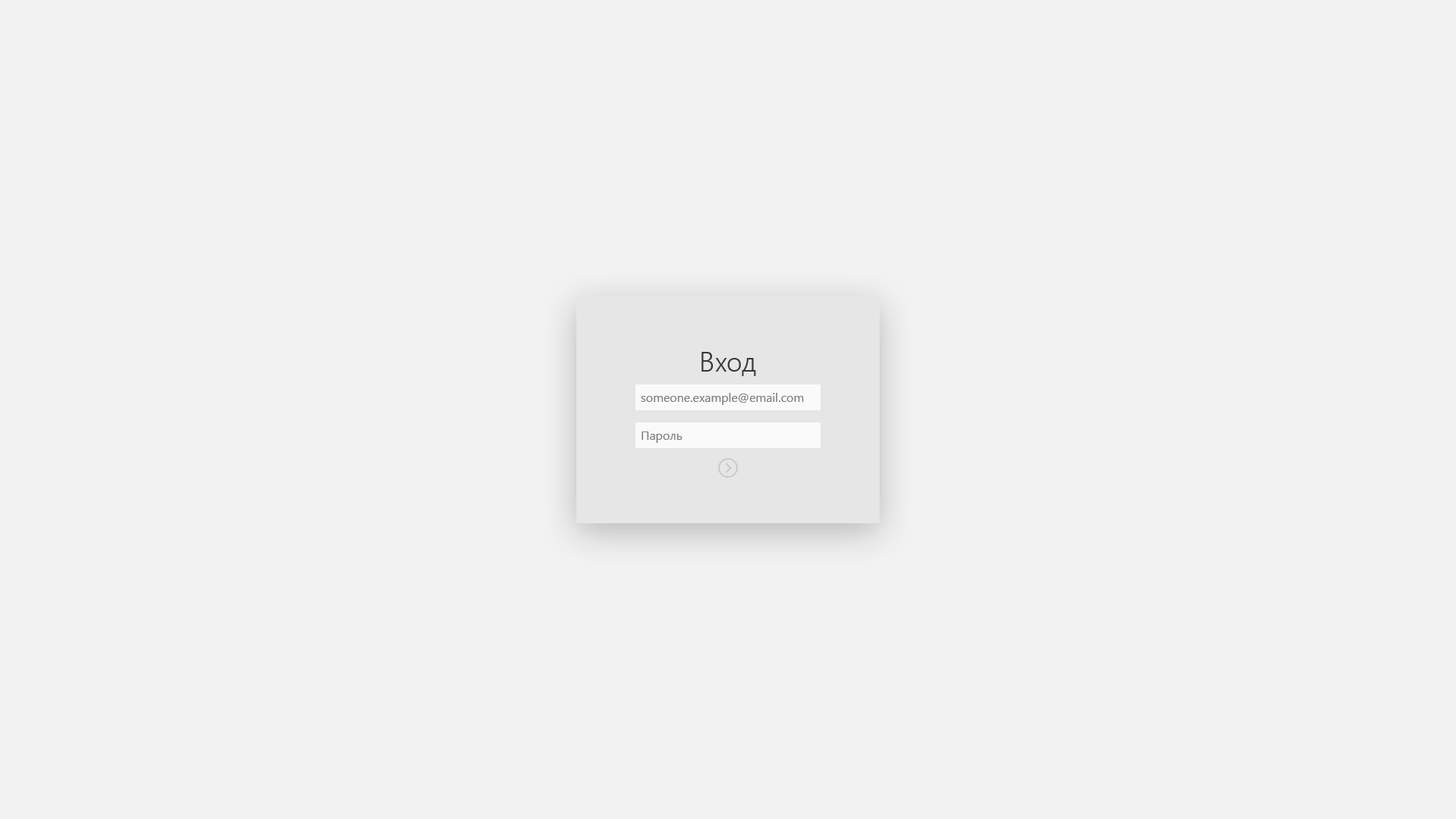
<style>
.page{position:relative;width:1456px;height:819px;background:#f2f2f2}
.page>*{position:absolute;margin:0}
.t1{font:27.3px "SegoeUI-Semilight";color:#373737}
.t2{font:12.1px "SegoeUI";color:#808080}
</style>
<div class="page">
<p class="t1" style="left:701px;top:352px;width:55px;height:24px">Вход</p>
<p class="t2" style="left:641px;top:393px;width:163px;height:12px">someone.example@email.com</p>
<p class="t2" style="left:642px;top:431px;width:40px;height:12px">Пароль</p>
</div>
